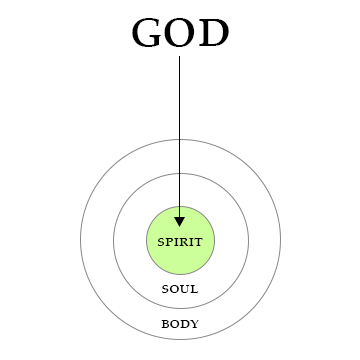
<style>
.page{position:relative;width:360px;height:360px;background:#ffffff}
.page>*{position:absolute;margin:0}
.t1{font:60px "PalatinoLinotype-Roman";color:#000000;font-variant:small-caps}
.t2{font:18px "PalatinoLinotype-Roman";color:#000000;font-variant:small-caps}
</style>
<div class="page">
<p class="t1" style="left:132px;top:18px;width:97px;height:29px">god</p>
<p class="t2" style="left:157px;top:238px;width:46px;height:8px">spirit</p>
<p class="t2" style="left:162px;top:285px;width:36px;height:8px">soul</p>
<p class="t2" style="left:161px;top:320px;width:38px;height:8px">body</p>
</div>
